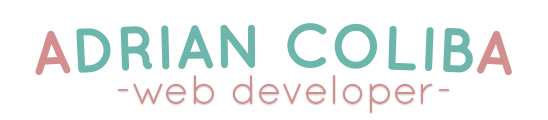
<style>
.page{position:relative;width:548px;height:120px;background:#ffffff}
.page>*{position:absolute;margin:0}
.t1{font:62.5px "Quicksand-Bold";color:#6cb6ac}
.t2{font:62.5px "Quicksand-Bold";color:#d48e8e}
.t3{font:41.7px "Quicksand-Regular";color:#d48e8e}
</style>
<div class="page">
<p class="t1" style="left:35px;top:23px;width:477px;height:53px"><span class="t2">A</span>DRIAN COLIB<span class="t2">A</span></p>
<p class="t3" style="left:117px;top:75px;width:333px;height:38px">-web developer-</p>
</div>
